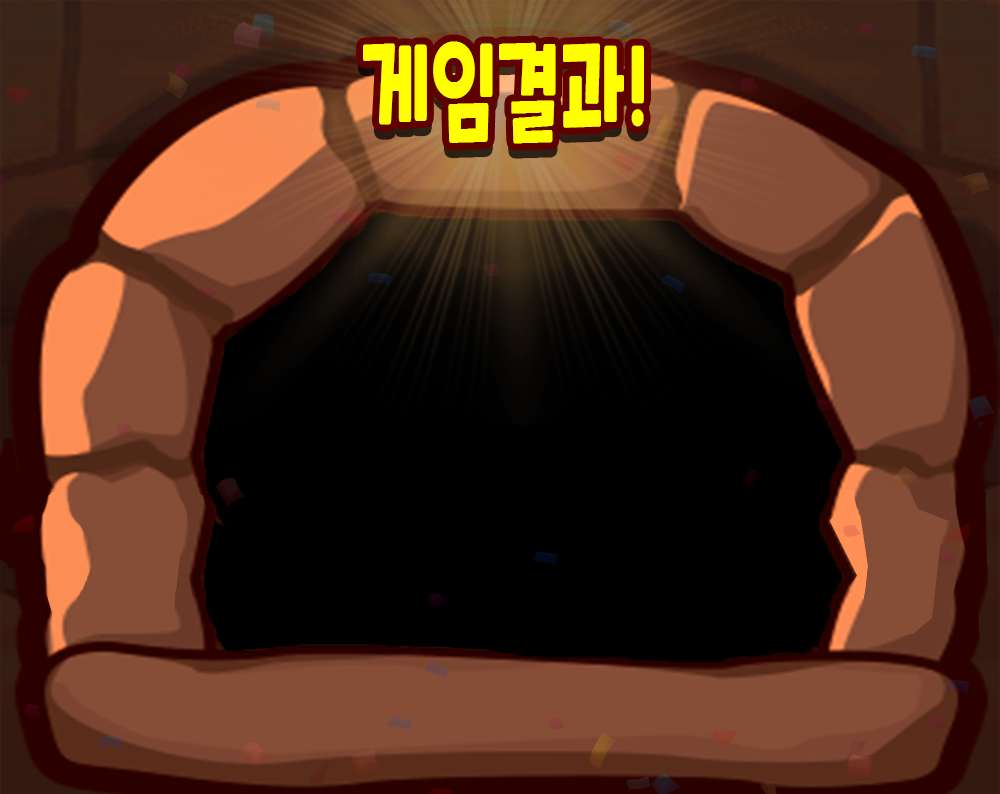
<style>
.page{position:relative;width:1000px;height:794px}
.page>*{position:absolute;margin:0}
.t1{font:108px "CookieRun-Bold";color:#ffff00;scale:0.67 1}
</style>
<div class="page">
<p class="t1" style="left:363px;top:41px;width:281px;height:103px">게임결과!</p>
</div>
